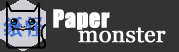
<style>
.page{position:relative;width:179px;height:52px;background:#333333}
.page>*{position:absolute;margin:0}
.t1{font:22.6px "-";letter-spacing:-0.025em;font-weight:bold}
.t2{font:23.1px "Impact";letter-spacing:-0.01em;color:#fdfdfe;font-weight:bold}
.t3{font:23.1px "Georgia";letter-spacing:-0.01em;color:#fdfdfe;font-weight:bold}
</style>
<div class="page">
<p class="t1" style="left:3px;top:16px;width:42px;height:21px">纸怪</p>
<p class="t2" style="left:53px;top:9px;width:57px;height:21px">Paper</p>
<p class="t3" style="left:78px;top:27px;width:88px;height:16px">monster</p>
</div>
